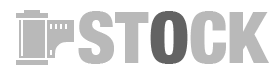
<style>
.page{position:relative;width:280px;height:76px;background:#ffffff}
.page>*{position:absolute;margin:0}
.t1{font:72px "HelveticaNeue-CondensedBlack";color:#b9b9b9}
.t2{font:72px "HelveticaNeue-CondensedBlack";color:#636363}
</style>
<div class="page">
<p class="t1" style="left:78px;top:11px;width:191px;height:53px">ST<span class="t2">O</span>CK</p>
</div>
